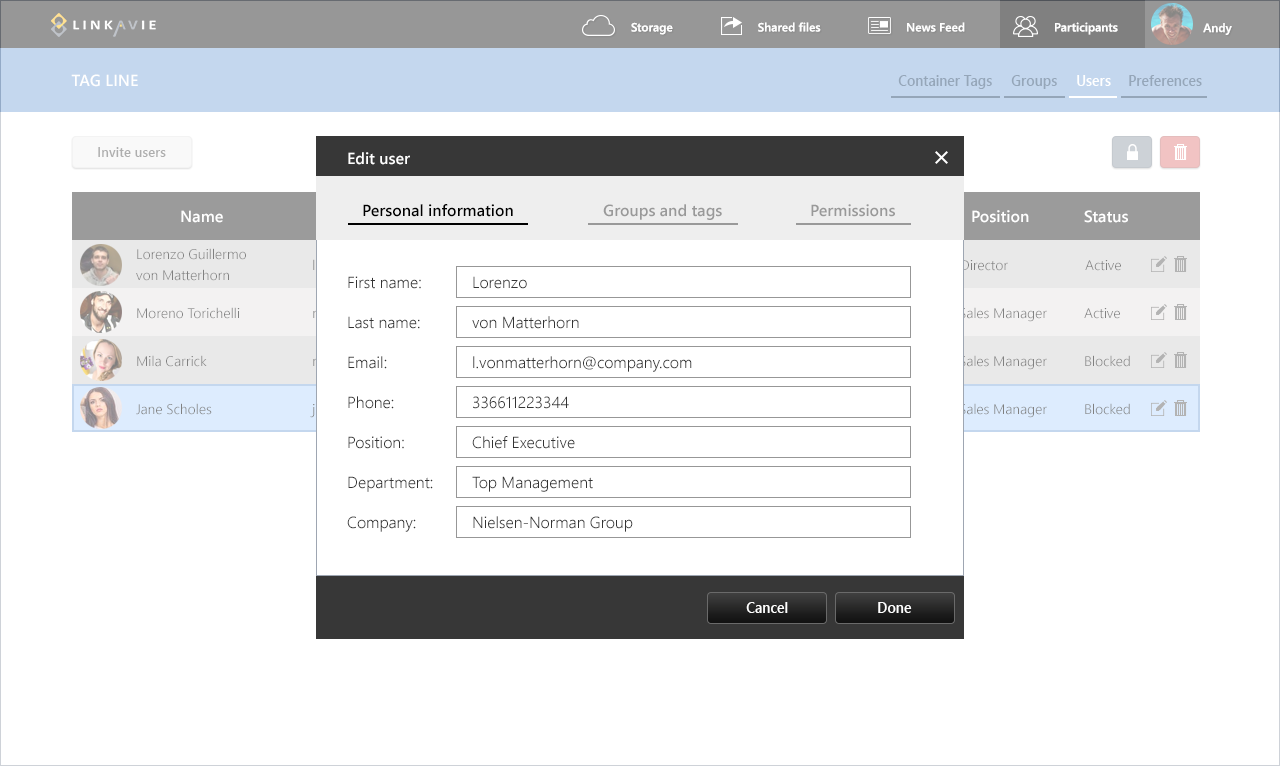
<style>
.page{position:relative;width:1280px;height:766px;background:#ffffff}
.page>*{position:absolute;margin:0}
.t1{font:12px "WeblySleekUISemibold";color:#ffffff}
.t2{font:16px "WeblySleekUISemibold";color:#ffffff;text-transform:uppercase}
.t3{font:14.7px "WeblySleekUISemibold";color:#95a6b9;scale:0.95 1}
.t4{font:14.7px "WeblySleekUISemibold";color:#ffffff;scale:0.95 1}
.t5{font:14px "WeblySleekUISemibold";color:#aeaeae;scale:0.95 1}
.t6{font:16px "WeblySleekUISemibold";color:#ffffff}
.t7{font:16px "WeblySleekUISemibold";color:#000000}
.t8{font:16px "WeblySleekUISemibold";color:#999999}
.t9{font:14px/21px "WeblySleekUISemilight";color:#808080}
.t10{font:14px "WeblySleekUISemilight";color:#808080}
.t11{font:16px/40px "WeblySleekUISemilight";color:#333333}
</style>
<div class="page">
<p class="t1" style="left:631px;top:22px;width:42px;height:13px">Storage</p>
<p class="t1" style="left:758px;top:22px;width:63px;height:10px">Shared files</p>
<p class="t1" style="left:907px;top:22px;width:58px;height:10px">News Feed</p>
<p class="t1" style="left:1055px;top:22px;width:63px;height:13px">Participants</p>
<p class="t1" style="left:1203px;top:23px;width:29px;height:12px">Andy</p>
<p class="t2" style="left:71px;top:74px;width:67px;height:13px">Tag line</p>
<p class="t3" style="left:898px;top:75px;width:94px;height:14px">Container Tags</p>
<p class="t3" style="left:1011px;top:75px;width:46px;height:14px">Groups</p>
<p class="t4" style="left:1077px;top:75px;width:34px;height:11px">Users</p>
<p class="t3" style="left:1129px;top:75px;width:73px;height:11px">Preferences</p>
<p class="t5" style="left:98px;top:147px;width:68px;height:10px">Invite users</p>
<p class="t6" style="left:348px;top:152px;width:62px;height:13px">Edit user</p>
<p class="t7" style="left:363px;top:204px;width:150px;height:13px">Personal information</p>
<p class="t8" style="left:603px;top:204px;width:119px;height:16px">Groups and tags</p>
<p class="t8" style="left:811px;top:204px;width:84px;height:13px">Permissions</p>
<p class="t6" style="left:181px;top:210px;width:42px;height:13px">Name</p>
<p class="t6" style="left:972px;top:210px;width:57px;height:13px">Position</p>
<p class="t6" style="left:1084px;top:210px;width:44px;height:13px">Status</p>
<p class="t9" style="left:136px;top:248px;width:110px;height:33px">Lorenzo Guillermo <br>von Matterhorn</p>
<p class="t10" style="left:961px;top:260px;width:47px;height:11px">Director</p>
<p class="t10" style="left:1085px;top:260px;width:36px;height:11px">Active</p>
<p class="t11" style="left:347px;top:276px;width:86px;height:256px">First name:<br>Last name:<br>Email:<br>Phone:<br>Position:<br>Department:<br>Company:</p>
<p class="t11" style="left:472px;top:276px;width:220px;height:256px">Lorenzo<br>von Matterhorn<br>l.vonmatterhorn@company.com<br>336611223344<br>Chief Executive <br>Top Management<br>Nielsen-Norman Group</p>
<p class="t10" style="left:137px;top:307px;width:103px;height:12px">Moreno Torichelli</p>
<p class="t10" style="left:960px;top:307px;width:87px;height:15px">Sales Manager</p>
<p class="t10" style="left:1084px;top:308px;width:36px;height:11px">Active</p>
<p class="t10" style="left:137px;top:355px;width:70px;height:12px">Mila Carrick</p>
<p class="t10" style="left:960px;top:355px;width:87px;height:15px">Sales Manager</p>
<p class="t10" style="left:1085px;top:355px;width:45px;height:12px">Blocked</p>
<p class="t10" style="left:136px;top:403px;width:76px;height:12px">Jane Scholes</p>
<p class="t10" style="left:960px;top:403px;width:87px;height:15px">Sales Manager</p>
<p class="t10" style="left:1085px;top:403px;width:45px;height:12px">Blocked</p>
<p class="t4" style="left:746px;top:602px;width:42px;height:11px">Cancel</p>
<p class="t4" style="left:878px;top:602px;width:34px;height:11px">Done</p>
</div>
